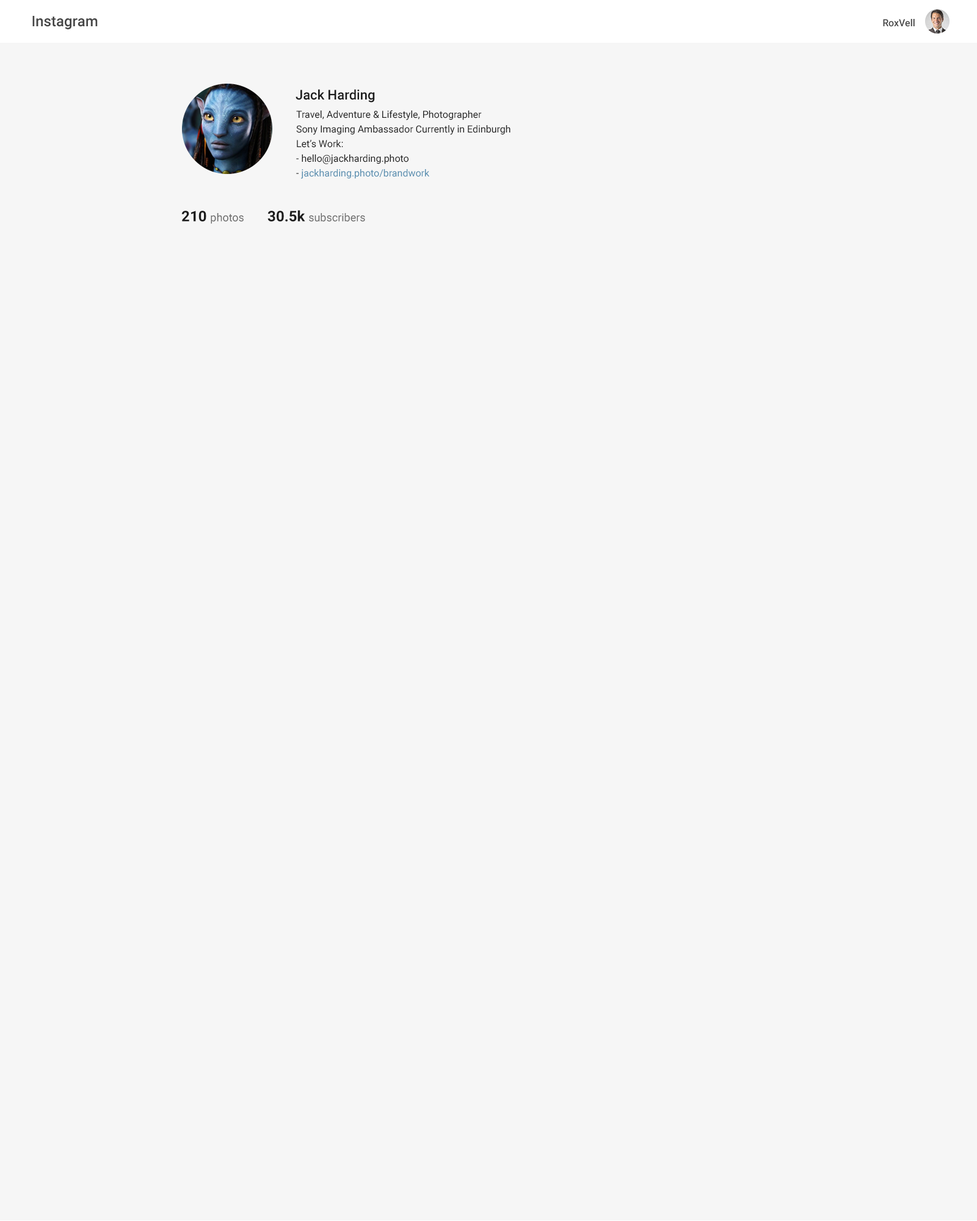
<style>
.page{position:relative;width:977px;height:1221px;background:#f6f6f6}
.page>*{position:absolute;margin:0}
.t1{font:14.7px "Roboto-Medium";color:#454545}
.t2{font:9.8px "Roboto-Medium";color:#454545}
.t3{font:13.4px "Roboto-Medium";color:#1c1c1c}
.t4{font:9.8px/14.7px "Roboto-Regular";color:#202020}
.t5{font:9.8px/14.7px "Roboto-Regular";color:#568daf}
.t6{font:11px "Roboto-Regular";color:#6e6e6e}
.t7{font:14.7px "Roboto-Bold";color:#1c1c1c}
</style>
<div class="page">
<p class="t1" style="left:32px;top:16px;width:66px;height:13px">Instagram</p>
<p class="t2" style="left:883px;top:19px;width:31px;height:8px">RoxVell</p>
<p class="t3" style="left:295px;top:89px;width:80px;height:14px">Jack Harding</p>
<p class="t4" style="left:296px;top:110px;width:214px;height:69px">Travel, Adventure &amp; Lifestyle, Photographer<br>Sony Imaging Ambassador Currently in Edinburgh<br>Let’s Work:<br>- hello@jackharding.photo<br>- <span class="t5">jackharding.photo/brandwork</span></p>
<p class="t6" style="left:267px;top:210px;width:98px;height:12px"><span class="t7">30.5k </span>subscribers</p>
<p class="t6" style="left:181px;top:211px;width:63px;height:13px"><span class="t7">210 </span>photos</p>
</div>
